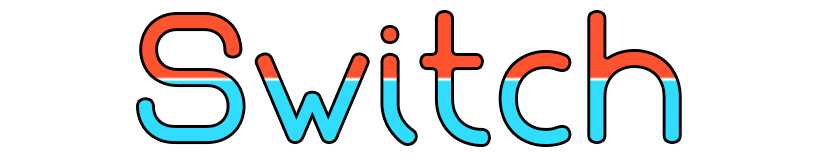
<style>
.page{position:relative;width:820px;height:160px;background:#ffffff}
.page>*{position:absolute;margin:0}
.t1{font:158.8px "Lachata"}
</style>
<div class="page">
<p class="t1" style="left:139px;top:13px;width:540px;height:131px">Switch</p>
</div>
